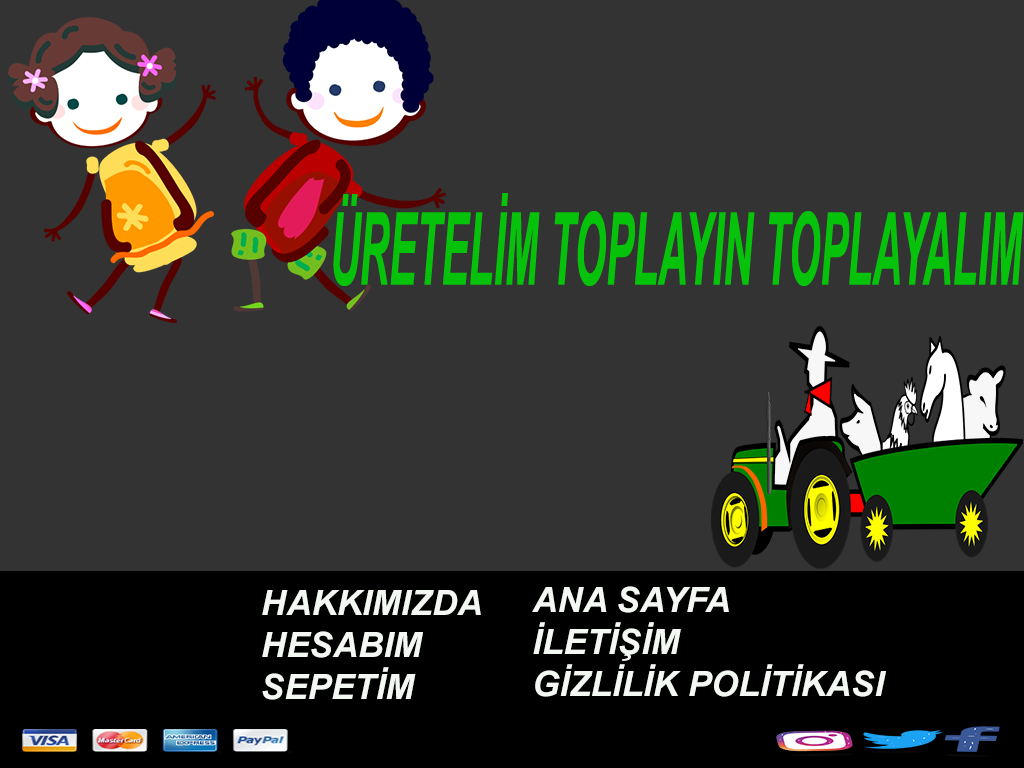
<style>
.page{position:relative;width:1024px;height:768px;background:#333333}
.page>*{position:absolute;margin:0}
.t1{font:101.3px "Arial-BoldItalicMT";color:#06c20a;scale:0.4 1}
.t2{font:35px "Arial-BoldItalicMT";color:#f3f8f3}
</style>
<div class="page">
<p class="t1" style="left:333px;top:193px;width:691px;height:93px">ÜRETELİM TOPLAYIN TOPLAYALIM</p>
<p class="t2" style="left:262px;top:590px;width:219px;height:110px">HAKKIMIZDA<br>HESABIM<br>SEPETİM</p>
<p class="t2" style="left:532px;top:586px;width:354px;height:111px">ANA SAYFA<br>İLETİŞİM<br>GİZLİLİK POLİTİKASI</p>
</div>
